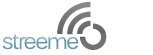
<style>
.page{position:relative;width:153px;height:55px;background:#ffffff}
.page>*{position:absolute;margin:0}
.t1{font:22.4px "Kalinga"}
</style>
<div class="page">
<p class="t1" style="left:2px;top:34px;width:77px;height:16px">streeme</p>
</div>
